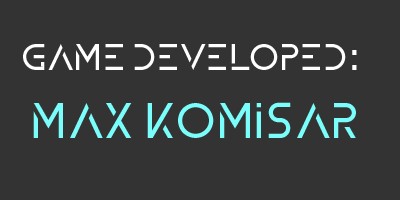
<style>
.page{position:relative;width:400px;height:200px;background:#333333}
.page>*{position:absolute;margin:0}
.t1{font:36px "ZELDA";color:#ffffff}
.t2{font:36px "Tahoma";color:#ffffff}
.t3{font:48px "ZELDA";color:#7afefc}
</style>
<div class="page">
<p class="t1" style="left:23px;top:44px;width:334px;height:26px">game developed<span class="t2">:</span></p>
<p class="t3" style="left:33px;top:102px;width:323px;height:36px">Max Komisar</p>
</div>
